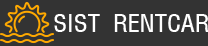
<style>
.page{position:relative;width:208px;height:46px;background:#333333}
.page>*{position:absolute;margin:0}
.t1{font:23px "MoeumTR-HM";color:#fffefe;text-transform:uppercase}
</style>
<div class="page">
<p class="t1" style="left:54px;top:14px;width:155px;height:18px">sist rentcar</p>
</div>
